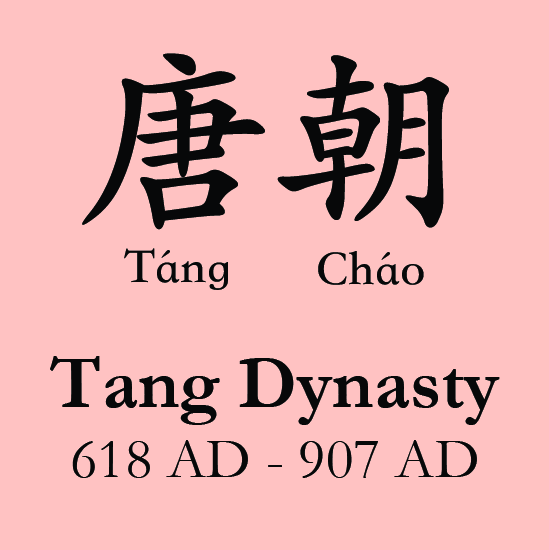
<style>
.page{position:relative;width:549px;height:550px;background:#ffc2c2}
.page>*{position:absolute;margin:0}
.t1{font:200px "STKaiti-SC-Bold";color:#070809}
.t2{font:50px "STKaiti-SC-Bold";color:#070809}
.t3{font:58.3px "Garamond";color:#070809}
.t4{font:75px "Garamond-Bold";color:#070809}
</style>
<div class="page">
<p class="t1" style="left:82px;top:53px;width:367px;height:177px">唐朝</p>
<p class="t2" style="left:124px;top:248px;width:104px;height:42px">Táng</p>
<p class="t2" style="left:318px;top:251px;width:106px;height:34px">Cháo</p>
<p class="t3" style="left:50px;top:356px;width:450px;height:122px;text-align:center"><span class="t4">Tang Dynasty<br></span>618 AD - 907 AD</p>
</div>
